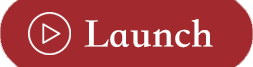
<style>
.page{position:relative;width:253px;height:67px;background:#a22a2e}
.page>*{position:absolute;margin:0}
.t1{font:41.7px "STSongti-TC-Bold";color:#ffffff}
</style>
<div class="page">
<p class="t1" style="left:84px;top:19px;width:129px;height:29px">Launch</p>
</div>
